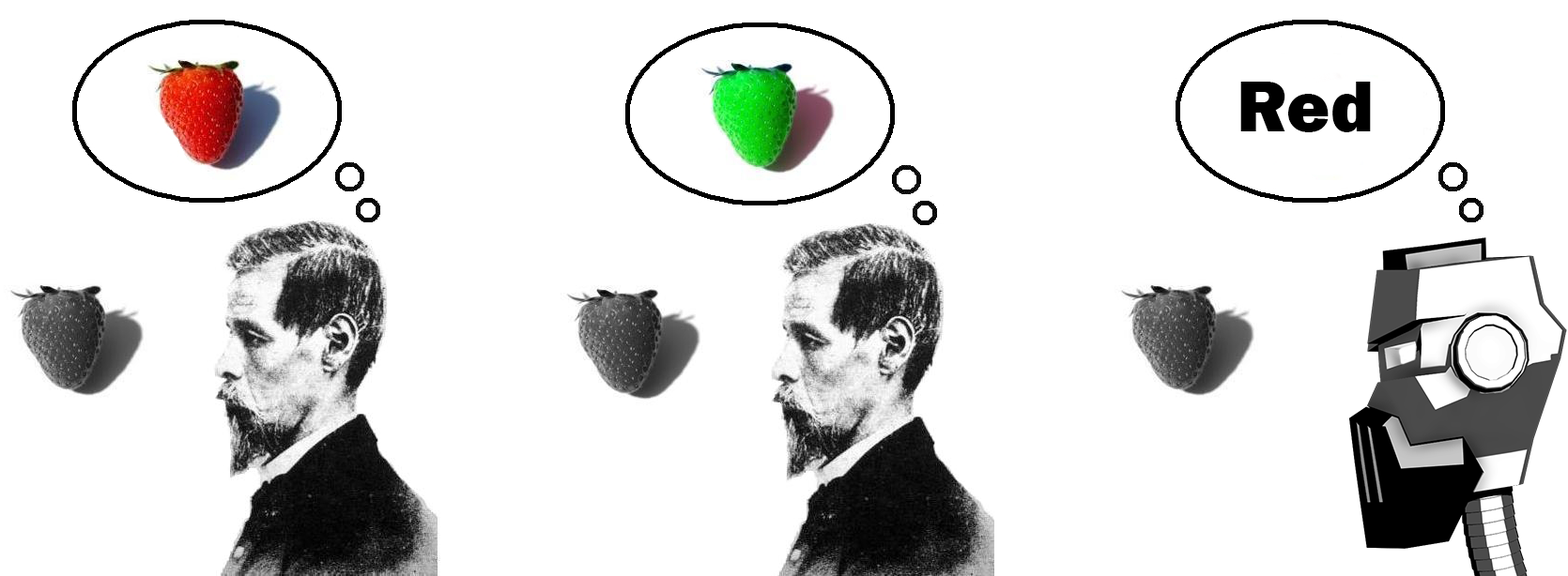
<style>
.page{position:relative;width:1568px;height:576px;background:#ffffff}
.page>*{position:absolute;margin:0}
.t1{font:74.1px "FranklinGothic-Heavy";color:#000000}
</style>
<div class="page">
<p class="t1" style="left:1240px;top:82px;width:131px;height:50px">Red</p>
</div>
